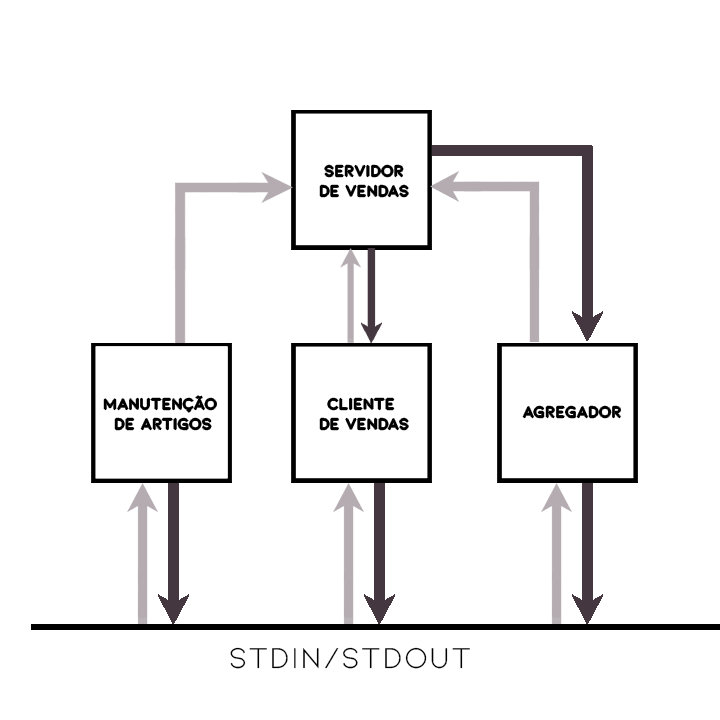
<style>
.page{position:relative;width:720px;height:720px;background:#ffffff}
.page>*{position:absolute;margin:0}
.t1{font:15.2px/20.3px "Kiona-Regular";letter-spacing:0.05em;color:#000000}
.t2{font:15.2px "Kiona-Regular";letter-spacing:0.05em;color:#000000}
.t3{font:30.5px "Kiona-Regular";letter-spacing:0.05em;color:#000000}
</style>
<div class="page">
<p class="t1" style="left:320px;top:165px;width:88px;height:32px;text-align:center">servidor<br>de vendas</p>
<p class="t1" style="left:104px;top:396px;width:112px;height:34px;text-align:center">manutenção <br>de artigos</p>
<p class="t1" style="left:320px;top:398px;width:88px;height:32px;text-align:center">cliente <br>de vendas</p>
<p class="t2" style="left:523px;top:406px;width:97px;height:12px">Agregador</p>
<p class="t3" style="left:230px;top:647px;width:240px;height:22px">stdin/stdout</p>
</div>
